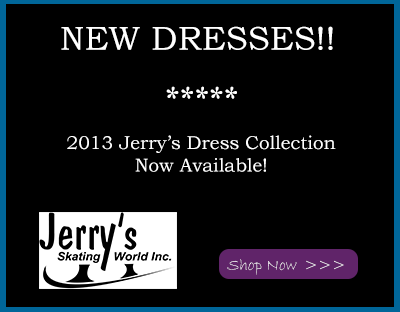
<style>
.page{position:relative;width:400px;height:312px;background:#000000}
.page>*{position:absolute;margin:0}
.t1{font:33.3px "BookmanOldStyle";color:#ffffff}
.t2{font:33.3px "BookmanOldStyle-Italic";color:#ffffff}
.t3{font:18.7px "BookmanOldStyle";color:#ffffff}
.t4{font:16.7px "BradleyHandITC";color:#ffffff}
.t5{font:16.7px "BradleyHandITC"}
</style>
<div class="page">
<p class="t1" style="left:61px;top:26px;width:272px;height:73px;text-align:center">NEW DRESSES!!<br><br><br><span class="t2">*****</span></p>
<p class="t3" style="left:67px;top:135px;width:269px;height:37px;text-align:center">2013 Jerry’s Dress Collection <br>Now Available!</p>
<p class="t4" style="left:227px;top:259px;width:70px;height:16px">Shop Now</p>
<p class="t5" style="left:306px;top:260px;width:38px;height:10px">&gt;&gt;&gt;</p>
</div>
